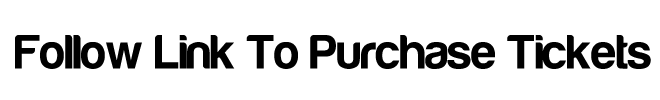
<style>
.page{position:relative;width:660px;height:100px;background:#ffffff}
.page>*{position:absolute;margin:0}
.t1{font:50px "Harabara-Bold";color:#000000}
</style>
<div class="page">
<p class="t1" style="left:15px;top:35px;width:636px;height:34px">Follow Link To Purchase Tickets</p>
</div>
